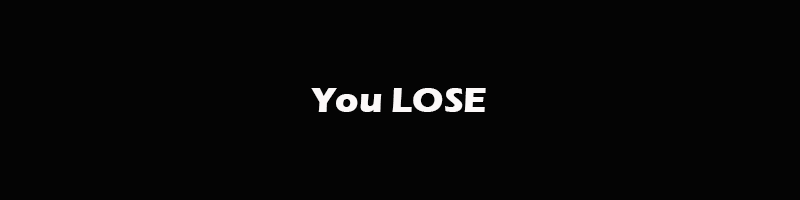
<style>
.page{position:relative;width:800px;height:200px;background:#040404}
.page>*{position:absolute;margin:0}
.t1{font:36px "ErasITC-Bold";color:#fbf8f8}
</style>
<div class="page">
<p class="t1" style="left:311px;top:88px;width:175px;height:24px">You LOSE</p>
</div>
